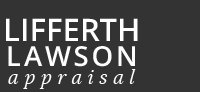
<style>
.page{position:relative;width:200px;height:92px;background:#333333}
.page>*{position:absolute;margin:0}
.t1{font:30.9px "OpenSans-Semibold";color:#ffffff}
.t2{font:27.5px "OpenSans-Semibold";letter-spacing:0.1em;color:#ffffff}
.t3{font:18.9px "Lora-Italic";letter-spacing:0.3em;color:#ffffff;font-style:italic}
</style>
<div class="page">
<p class="t1" style="left:6px;top:18px;width:132px;height:23px">LIFFERTH</p>
<p class="t2" style="left:8px;top:46px;width:127px;height:21px">LAWSON</p>
<p class="t3" style="left:8px;top:69px;width:128px;height:20px">appraisal</p>
</div>
